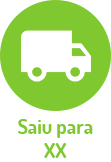
<style>
.page{position:relative;width:111px;height:162px;background:#ffffff}
.page>*{position:absolute;margin:0}
.t1{font:20px/24px "Dosis-Bold";color:#7fc830}
</style>
<div class="page">
<p class="t1" style="left:18px;top:119px;width:75px;height:39px;text-align:center">Saiu para<br>XX</p>
</div>
